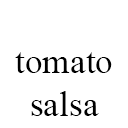
<style>
.page{position:relative;width:128px;height:128px;background:#ffffff}
.page>*{position:absolute;margin:0}
.t1{font:35.4px "TimesNewRomanPSMT";color:#000000}
</style>
<div class="page">
<p class="t1" style="left:15px;top:52px;width:97px;height:64px;text-align:center">tomato<br>salsa</p>
</div>
